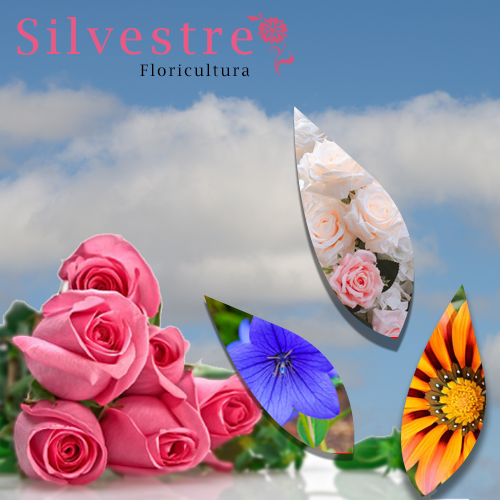
<style>
.page{position:relative;width:500px;height:500px}
.page>*{position:absolute;margin:0}
.t1{font:48px "LucidaBright";letter-spacing:0.11em;color:#ea5883}
.t2{font:16px "LucidaBright";letter-spacing:0.11em;color:#000000}
</style>
<div class="page">
<p class="t1" style="left:17px;top:17px;width:236px;height:38px">Silvestre</p>
<p class="t2" style="left:140px;top:63px;width:110px;height:14px">Floricultura</p>
</div>
